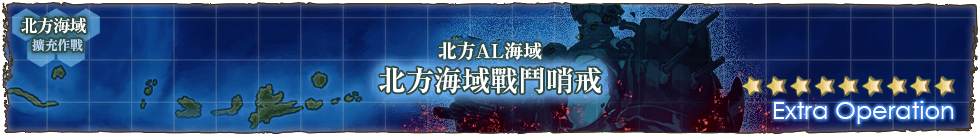
<style>
.page{position:relative;width:980px;height:136px}
.page>*{position:absolute;margin:0}
.t1{font:17px/22px "RyuminPr6N-ExBold";letter-spacing:-0.04em;color:#ffffff}
.t2{font:13px/22px "RyuminPr6N-ExBold";letter-spacing:-0.04em;color:#b9d7f5}
.t3{font:19px "RyuminPro-ExBold";color:#ffffff}
.t4{font:28px "RyuminPro-ExBold";color:#ffffff}
</style>
<div class="page">
<p class="t1" style="left:21px;top:17px;width:65px;height:35px">北方海域<br>　　<span class="t2">擴充作戰</span></p>
<p class="t3" style="left:438px;top:41px;width:104px;height:19px">北方AL海域</p>
<p class="t4" style="left:379px;top:67px;width:222px;height:27px">北方海域戰鬥哨戒</p>
</div>
